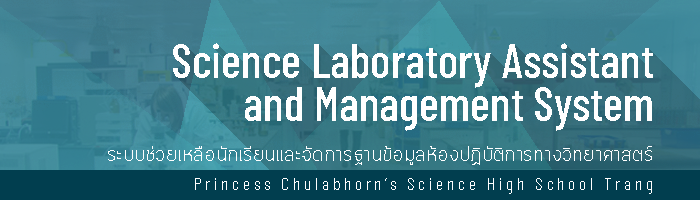
<style>
.page{position:relative;width:700px;height:200px}
.page>*{position:absolute;margin:0}
.t1{font:47.2px/42.4px "BarlowCondensed-Medium";color:#ffffff}
.t2{font:21.2px "Cloud-Light";color:#ffffff}
.t3{font:17.9px "BarlowCondensed-Light";letter-spacing:0.2em;color:#ffffff}
</style>
<div class="page">
<p class="t1" style="left:173px;top:43px;width:480px;height:88px">Science Laboratory Assistant <br>and Management System</p>
<p class="t2" style="left:108px;top:146px;width:544px;height:19px">ระบบช่วยเหลือนักเรียนและจัดการฐานข้อมูลห้องปฏิบัติการทางวิทยาศาสตร์</p>
<p class="t3" style="left:195px;top:178px;width:457px;height:16px">Princess Chulabhorn’s Science High School Trang</p>
</div>
